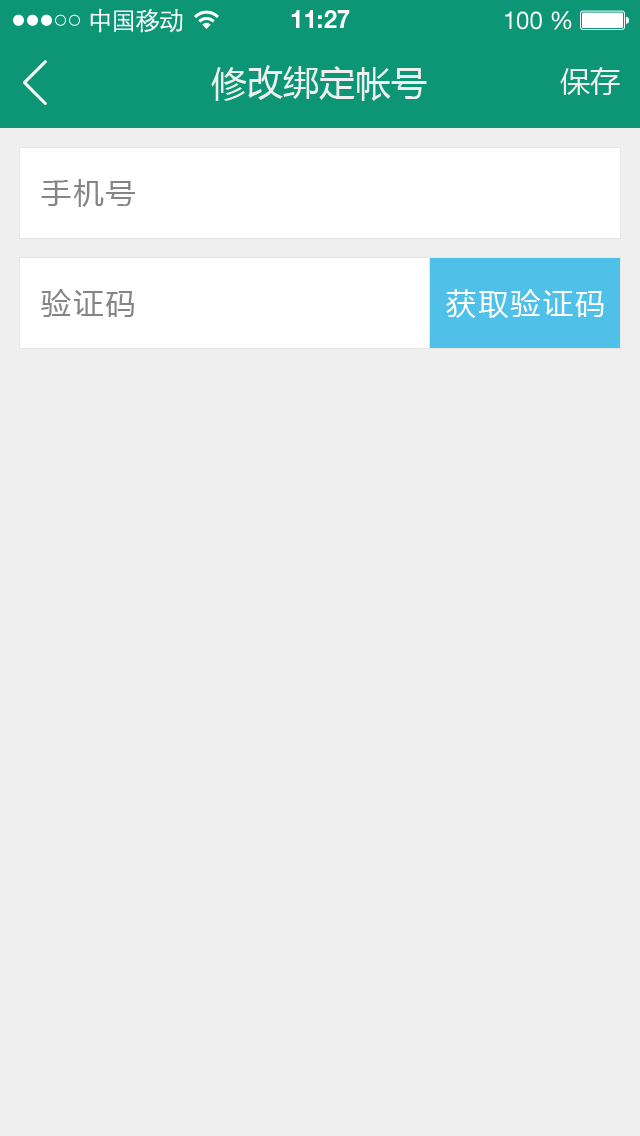
<style>
.page{position:relative;width:640px;height:1136px;background:#efefef}
.page>*{position:absolute;margin:0}
.t1{font:25px "STXihei";letter-spacing:-0.045em;color:#fefefe}
.t2{font:24.6px "HelveticaNeueLTPro-Bd";color:#ffffff}
.t3{font:24.6px "HelveticaNeueLTStd-Roman";color:#ffffff}
.t4{font:36px "MicrosoftYaHei";color:#efefef}
.t5{font:30px "MicrosoftYaHei";color:#efefef}
.t6{font:30px "MicrosoftYaHei";letter-spacing:0.075em;color:#858585}
.t7{font:30px "MicrosoftYaHei";letter-spacing:0.075em;color:#ffffff}
</style>
<div class="page">
<p class="t1" style="left:90px;top:8px;width:93px;height:25px">中国移动</p>
<p class="t2" style="left:291px;top:10px;width:59px;height:18px">11:27</p>
<p class="t3" style="left:505px;top:11px;width:67px;height:19px">100 %</p>
<p class="t4" style="left:211px;top:65px;width:216px;height:36px">修改绑定帐号</p>
<p class="t5" style="left:560px;top:67px;width:60px;height:28px">保存</p>
<p class="t6" style="left:41px;top:179px;width:94px;height:28px">手机号</p>
<p class="t6" style="left:41px;top:289px;width:93px;height:28px">验证码</p>
<p class="t7" style="left:446px;top:289px;width:158px;height:29px">获取验证码</p>
</div>
